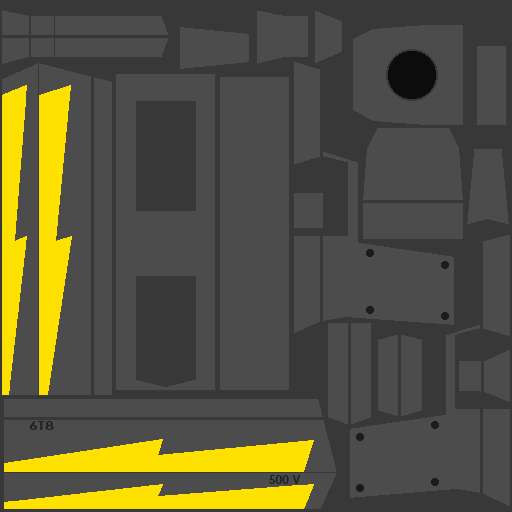
<style>
.page{position:relative;width:512px;height:512px;background:#4c4c4d}
.page>*{position:absolute;margin:0}
.t1{font:12px "CenturyGothic-Bold";color:#212121;scale:1.37 1}
.t2{font:12px "CenturyGothic-Bold";color:#212121}
</style>
<div class="page">
<p class="t1" style="left:29px;top:421px;width:25px;height:9px">6T8</p>
<p class="t2" style="left:269px;top:475px;width:32px;height:9px">500 V</p>
</div>
